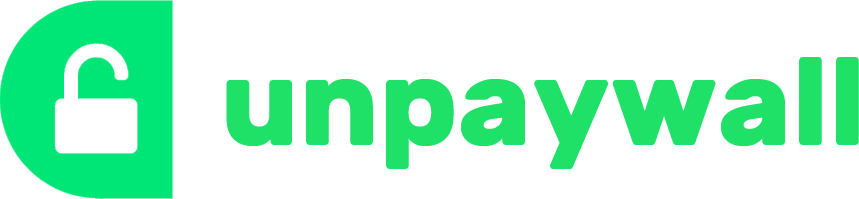
<style>
.page{position:relative;width:859px;height:199px;background:#ffffff}
.page>*{position:absolute;margin:0}
.t1{font:124.9px "Rubik-Bold";color:#20e168}
</style>
<div class="page">
<p class="t1" style="left:226px;top:57px;width:633px;height:112px">unpaywall</p>
</div>
